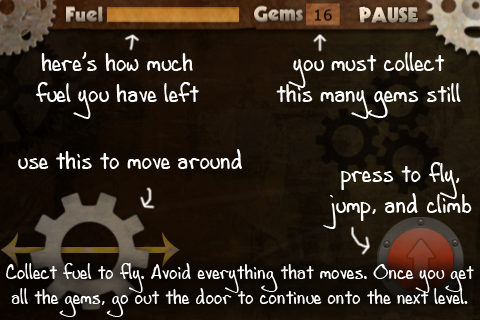
<style>
.page{position:relative;width:480px;height:320px}
.page>*{position:absolute;margin:0}
.t1{font:26px "AndrewScript16";color:#ffffff}
.t2{font:21px "AndrewScript16";color:#ffffff}
</style>
<div class="page">
<p class="t1" style="left:35px;top:52px;width:164px;height:67px;text-align:center">here’s how much<br>fuel you have left</p>
<p class="t1" style="left:276px;top:52px;width:185px;height:67px;text-align:center">you must collect<br>this many gems still</p>
<p class="t1" style="left:18px;top:149px;width:224px;height:20px">use this to move around</p>
<p class="t1" style="left:323px;top:162px;width:149px;height:67px;text-align:center">press to fly,<br>jump, and climb</p>
<p class="t2" style="left:6px;top:263px;width:468px;height:54px;text-align:center">Collect fuel to fly. Avoid everything that moves. Once you get<br>all the gems, go out the door to continue onto the next level.</p>
</div>
